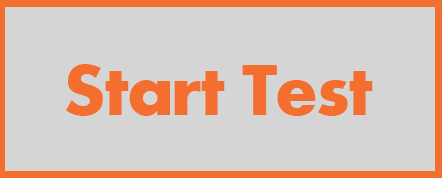
<style>
.page{position:relative;width:442px;height:178px;background:#d5d5d5}
.page>*{position:absolute;margin:0}
.t1{font:75px "Aharoni-Bold";letter-spacing:-0.025em;color:#f36e2f}
</style>
<div class="page">
<p class="t1" style="left:66px;top:64px;width:307px;height:52px">Start Test</p>
</div>
